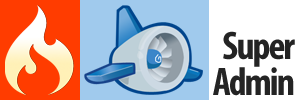
<style>
.page{position:relative;width:300px;height:100px;background:#a0caed}
.page>*{position:absolute;margin:0}
.t1{font:40px/36px "MyriadPro-BoldCond";letter-spacing:-0.05em;color:#242424}
</style>
<div class="page">
<p class="t1" style="left:213px;top:31px;width:82px;height:65px;text-align:right">Super<br>Admin</p>
</div>
